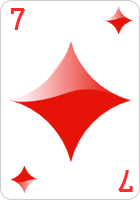
<style>
.page{position:relative;width:140px;height:200px;background:#ffffff}
.page>*{position:absolute;margin:0}
.t1{font:26px "CardCharacters";color:#ff2b2b}
</style>
<div class="page">
<p class="t1" style="left:10px;top:8px;width:15px;height:22px">7</p>
<p class="t1" style="left:118px;top:170px;width:15px;height:22px;rotate:180deg">7</p>
</div>
